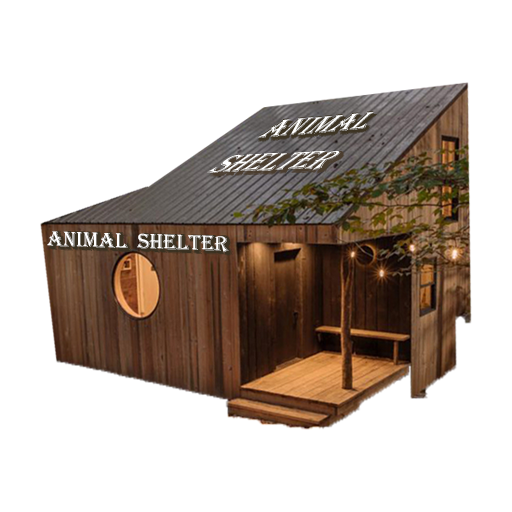
<style>
.page{position:relative;width:512px;height:512px;background:#ffffff}
.page>*{position:absolute;margin:0}
.t1{font:38.5px "Algerian";scale:0.75 1}
.t2{font:38.5px "Algerian";color:#ffffff;scale:0.75 1}
.t3{font:45.7px "Algerian";color:#ffffff;scale:0.6 1}
.t4{font:21.6px "Algerian";color:#ffffff}
</style>
<div class="page">
<p class="t1" style="left:258px;top:111px;width:116px;height:26px;rotate:-5deg">ANIMAL</p>
<p class="t1" style="left:258px;top:113px;width:116px;height:26px;rotate:-5deg">ANIMAL</p>
<p class="t2" style="left:258px;top:112px;width:116px;height:26px;rotate:-5deg">ANIMAL</p>
<p class="t1" style="left:259px;top:113px;width:116px;height:26px;rotate:-5deg">ANIMAL</p>
<p class="t1" style="left:258px;top:114px;width:116px;height:26px;rotate:-5deg">ANIMAL</p>
<p class="t1" style="left:258px;top:114px;width:116px;height:26px;rotate:-5deg">ANIMAL</p>
<p class="t3" style="left:207px;top:150px;width:134px;height:23px;rotate:-2deg">SHELTER</p>
<p class="t3" style="left:207px;top:150px;width:134px;height:23px;rotate:-2deg">SHELTER</p>
<p class="t4" style="left:47px;top:231px;width:182px;height:22px;rotate:2deg">ANIMAL  SHELTER</p>
</div>
